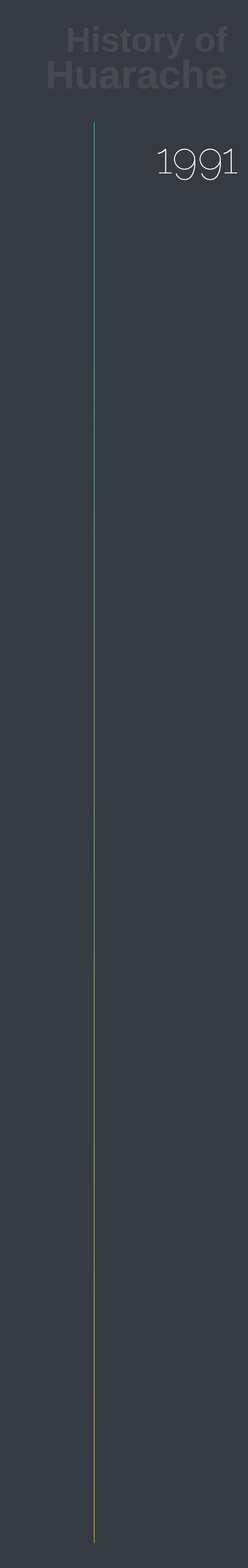
<style>
.page{position:relative;width:248px;height:1568px;background:#363a43}
.page>*{position:absolute;margin:0}
.t1{font:34.6px/36.8px "Arimo-Bold";color:#474a52}
.t2{font:39.9px/36.8px "Arimo-Bold";color:#474a52}
.t3{font:43px "Raleway-Thin";color:#ffffff}
</style>
<div class="page">
<p class="t1" style="left:48px;top:26px;width:179px;height:63px;text-align:right">History of<br><span class="t2">Huarache</span></p>
<p class="t3" style="left:158px;top:149px;width:80px;height:31px">1991</p>
</div>
